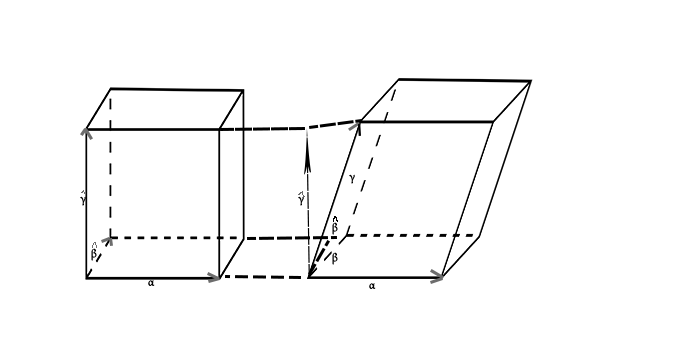
<style>
.page{position:relative;width:700px;height:350px;background:#ffffff}
.page>*{position:absolute;margin:0}
.t1{font:12px "MinionPro-Regular";color:#000000}
</style>
<div class="page">
<p class="t1" style="left:349px;top:174px;width:6px;height:10px">γ</p>
<p class="t1" style="left:80px;top:196px;width:6px;height:10px">γ</p>
<p class="t1" style="left:91px;top:248px;width:6px;height:13px">β</p>
<p class="t1" style="left:332px;top:252px;width:6px;height:13px">β</p>
<p class="t1" style="left:148px;top:280px;width:7px;height:6px">α</p>
<p class="t1" style="left:369px;top:283px;width:7px;height:6px">α</p>
</div>
